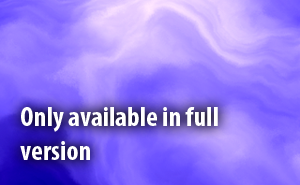
<style>
.page{position:relative;width:300px;height:185px}
.page>*{position:absolute;margin:0}
.t1{font:28px "MyriadPro-BoldCond";color:#ffffff}
</style>
<div class="page">
<p class="t1" style="left:20px;top:107px;width:198px;height:53px">Only available in full version</p>
</div>
